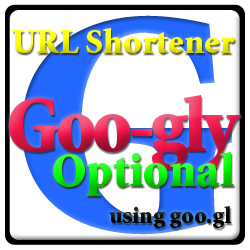
<style>
.page{position:relative;width:250px;height:250px;background:#ffffff}
.page>*{position:absolute;margin:0}
.t1{font:320px "MinionStd-Black"}
.t2{font:35px "MinionStd-Black"}
.t3{font:80px "MinionStd-Black";letter-spacing:-0.04em;scale:0.95 1}
.t4{font:48px "MinionStd-Black"}
.t5{font:24px "MinionStd-Black";color:#000000}
</style>
<div class="page">
<p class="t1" style="left:22px;top:15px;width:210px;height:220px">G</p>
<p class="t2" style="left:12px;top:28px;width:223px;height:25px">URL Shortener</p>
<p class="t3" style="left:8px;top:95px;width:233px;height:74px">Goo-gly</p>
<p class="t4" style="left:53px;top:152px;width:181px;height:44px">Optional</p>
<p class="t5" style="left:109px;top:206px;width:123px;height:22px">using goo.gl</p>
</div>
